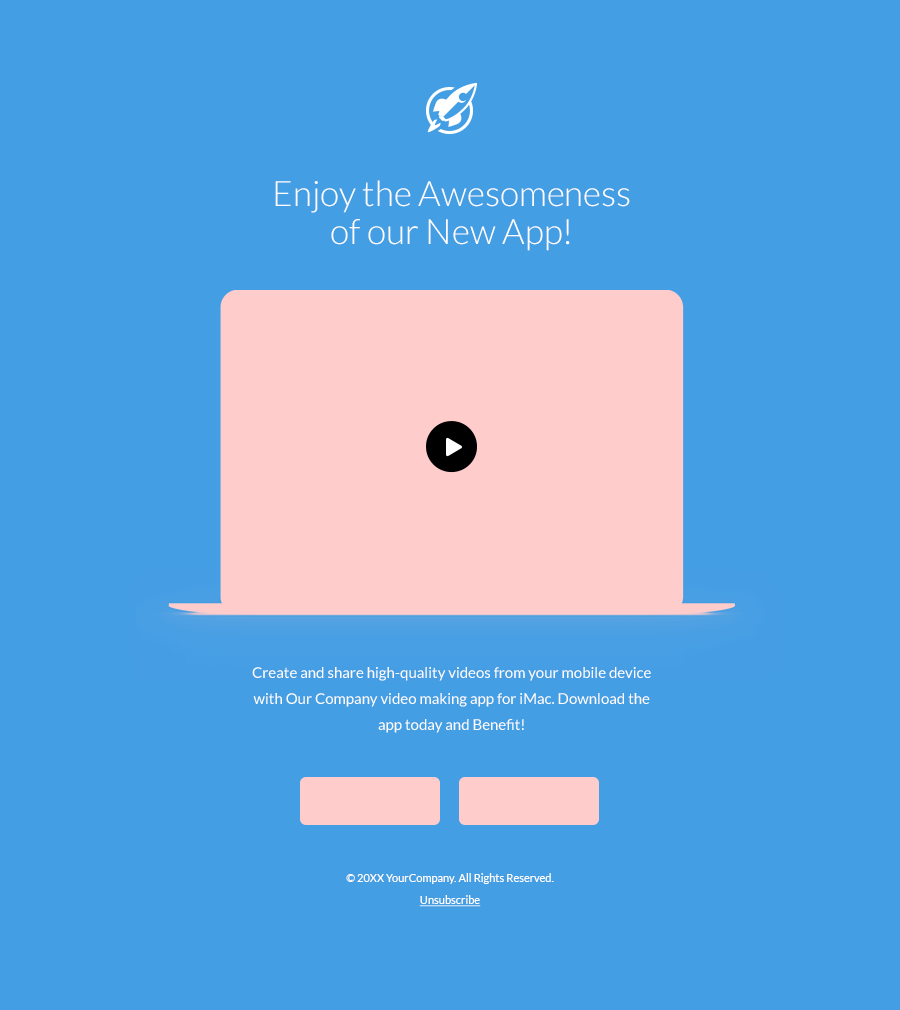
<style>
.page{position:relative;width:900px;height:1010px;background:#449ee4}
.page>*{position:absolute;margin:0}
.t1{font:35px/38px "Lato-Light";color:#ffffff}
.t2{font:15px/26px "Lato-Regular";color:#ffffff}
.t3{font:11px/22px "Lato-Regular";color:#ffffff}
.t4{font:11px/22px "Lato-Regular";color:#ffffff;text-decoration:underline}
</style>
<div class="page">
<p class="t1" style="left:275px;top:180px;width:355px;height:71px;text-align:center">Enjoy the Awesomeness <br>of our New App!</p>
<p class="t2" style="left:252px;top:667px;width:399px;height:66px;text-align:center">Create and share high-quality videos from your mobile device with Our Company video making app for iMac. Download the app today and Benefit!</p>
<p class="t3" style="left:346px;top:873px;width:208px;height:34px;text-align:center">© 20XX YourCompany. All Rights Reserved.<br><span class="t4">Unsubscribe</span></p>
</div>
